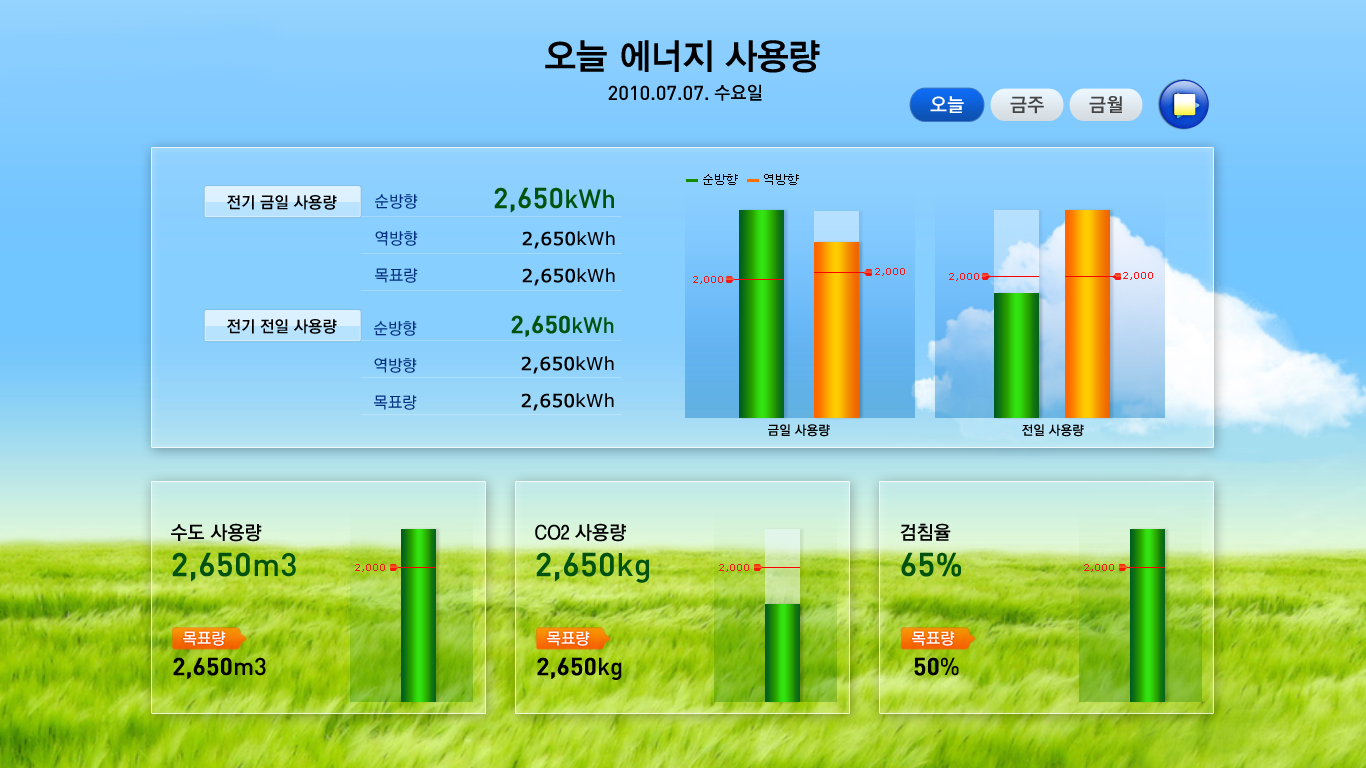
<style>
.page{position:relative;width:1366px;height:768px}
.page>*{position:absolute;margin:0}
.t1{font:36px "YDIYGO340";color:#000000;scale:0.95 1}
.t2{font:20px "DINMMedium";color:#000000}
.t3{font:18px "YGO540";color:#000000}
.t4{font:19px "YGO540";color:#ffffff}
.t5{font:19px "YGO540";color:#444444}
.t6{font:12px "DotumChe";color:#000000}
.t7{font:16px "YGO540";color:#000000}
.t8{font:16px/37px "YGO530";color:#002c7e}
.t9{font:28px/35.1px "DINMMedium";color:#00520f;font-weight:bold}
.t10{font:26px/35.1px "DINMMedium";color:#00520f}
.t11{font:18px/37px "Verdana";color:#000000;font-weight:bold}
.t12{font:18px/37px "Verdana";color:#000000}
.t13{font:10px "Verdana";color:#f91619}
.t14{font:24px/35.1px "DINMMedium";color:#00520f;font-weight:bold}
.t15{font:22px/35.1px "DINMMedium";color:#00520f}
.t16{font:13px "YGO540";color:#000000}
.t17{font:19px "YGO540";color:#000000}
.t18{font:32px "DINMMedium";color:#00520f;font-weight:bold}
.t19{font:32px "DINMMedium";color:#00520f}
.t20{font:16px "YGO540";color:#ffffff}
.t21{font:24px "DINMMedium";color:#000000;font-weight:bold}
.t22{font:24px "DINMMedium";color:#000000}
</style>
<div class="page">
<p class="t1" style="left:545px;top:40px;width:275px;height:33px">오늘 에너지 사용량</p>
<p class="t2" style="left:608px;top:84px;width:154px;height:17px">2010.07.07. <span class="t3">수요일</span></p>
<p class="t4" style="left:930px;top:96px;width:34px;height:17px">오늘</p>
<p class="t5" style="left:1010px;top:96px;width:34px;height:18px">금주</p>
<p class="t5" style="left:1089px;top:96px;width:33px;height:17px">금월</p>
<p class="t6" style="left:703px;top:174px;width:35px;height:11px">순방향</p>
<p class="t6" style="left:764px;top:174px;width:35px;height:11px">역방향</p>
<p class="t7" style="left:227px;top:195px;width:110px;height:15px">전기 금일 사용량</p>
<p class="t8" style="left:375px;top:194px;width:43px;height:89px">순방향<br>역방향<br>목표량</p>
<p class="t9" style="left:494px;top:187px;width:121px;height:99px;text-align:right">2,650<span class="t10">kWh<br></span><span class="t11">2,650</span><span class="t12">kWh<br></span><span class="t11">2,650</span><span class="t12">kWh</span></p>
<p class="t13" style="left:875px;top:268px;width:30px;height:8px">2,000</p>
<p class="t13" style="left:693px;top:276px;width:30px;height:8px">2,000</p>
<p class="t13" style="left:949px;top:273px;width:30px;height:8px">2,000</p>
<p class="t13" style="left:1123px;top:272px;width:30px;height:8px">2,000</p>
<p class="t14" style="left:511px;top:315px;width:103px;height:96px;text-align:right">2,650<span class="t15">kWh<br></span><span class="t11">2,650</span><span class="t12">kWh<br></span><span class="t11">2,650</span><span class="t12">kWh</span></p>
<p class="t7" style="left:227px;top:319px;width:110px;height:15px">전기 전일 사용량</p>
<p class="t8" style="left:374px;top:321px;width:43px;height:89px">순방향<br>역방향<br>목표량</p>
<p class="t16" style="left:768px;top:424px;width:62px;height:13px">금일 사용량</p>
<p class="t16" style="left:1022px;top:424px;width:62px;height:13px">전일 사용량</p>
<p class="t17" style="left:171px;top:523px;width:91px;height:19px">수도 사용량</p>
<p class="t17" style="left:535px;top:523px;width:91px;height:19px">CO2 사용량</p>
<p class="t17" style="left:900px;top:523px;width:51px;height:18px">검침율</p>
<p class="t18" style="left:172px;top:552px;width:124px;height:30px">2,650<span class="t19">m3</span></p>
<p class="t18" style="left:536px;top:552px;width:113px;height:31px">2,650<span class="t19">kg</span></p>
<p class="t18" style="left:901px;top:552px;width:60px;height:25px">65%</p>
<p class="t13" style="left:355px;top:564px;width:30px;height:8px">2,000</p>
<p class="t13" style="left:719px;top:564px;width:30px;height:8px">2,000</p>
<p class="t13" style="left:1084px;top:564px;width:30px;height:8px">2,000</p>
<p class="t20" style="left:183px;top:631px;width:43px;height:15px">목표량</p>
<p class="t20" style="left:547px;top:631px;width:43px;height:15px">목표량</p>
<p class="t20" style="left:912px;top:631px;width:43px;height:15px">목표량</p>
<p class="t21" style="left:173px;top:657px;width:93px;height:22px">2,650<span class="t22">m3</span></p>
<p class="t21" style="left:537px;top:657px;width:85px;height:23px">2,650<span class="t22">kg</span></p>
<p class="t21" style="left:914px;top:657px;width:45px;height:19px">50<span class="t22">%</span></p>
</div>
